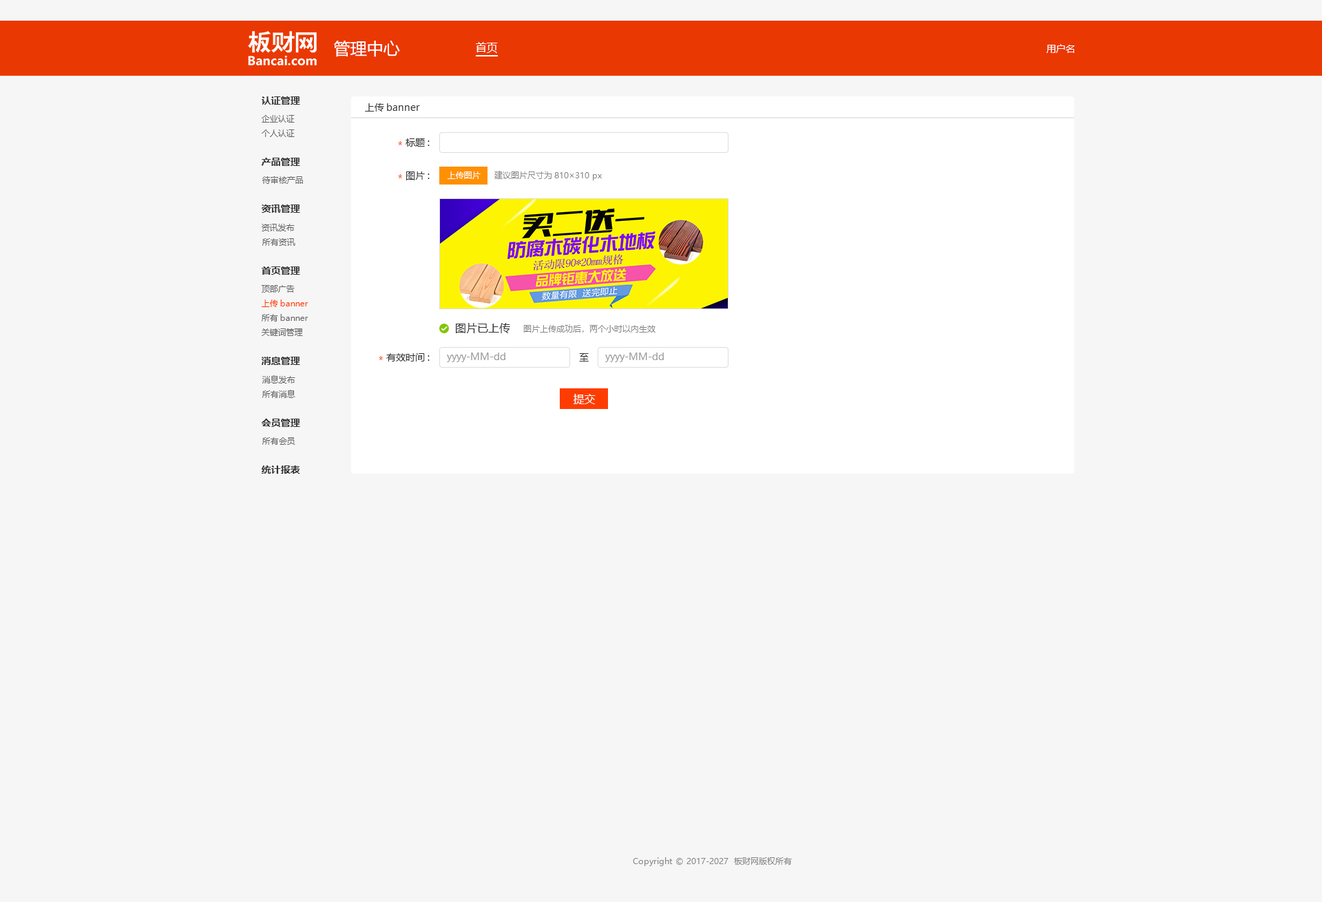
<style>
.page{position:relative;width:1322px;height:902px;background:#f6f6f6}
.page>*{position:absolute;margin:0}
.t1{font:16.5px "MicrosoftYaHei";color:#ffffff}
.t2{font:11px "MicrosoftYaHei";color:#ffffff}
.t3{font:9.6px "MicrosoftYaHei";color:#ffffff}
.t4{font:9.6px "MicrosoftYaHei-Bold";color:#333333}
.t5{font:9.6px "MicrosoftYaHei";color:#333333}
.t6{font:8.3px "MicrosoftYaHei";color:#666666}
.t7{font:9.6px "MicrosoftYaHei";color:#ff3c00}
.t8{font:8.3px "MicrosoftYaHei";color:#fffefe}
.t9{font:8.3px "MicrosoftYaHei";color:#888888}
.t10{font:8.3px "MicrosoftYaHei";color:#ff3c00}
.t11{font:11px "MicrosoftYaHei";color:#333333}
.t12{font:9.6px "MicrosoftYaHei";color:#999999}
.t13{font:11px "MicrosoftYaHei";color:#fffefe}
</style>
<div class="page">
<p class="t1" style="left:334px;top:41px;width:66px;height:16px">管理中心</p>
<p class="t2" style="left:476px;top:42px;width:22px;height:11px">首页</p>
<p class="t3" style="left:1047px;top:44px;width:28px;height:9px">用户名</p>
<p class="t4" style="left:262px;top:96px;width:38px;height:9px">认证管理</p>
<p class="t5" style="left:365px;top:103px;width:55px;height:9px">上传banner</p>
<p class="t6" style="left:262px;top:115px;width:33px;height:8px">企业认证</p>
<p class="t6" style="left:262px;top:129px;width:33px;height:8px">个人认证</p>
<p class="t7" style="left:398px;top:141px;width:4px;height:4px">*</p>
<p class="t5" style="left:406px;top:138px;width:24px;height:9px">标题:</p>
<p class="t4" style="left:261px;top:158px;width:39px;height:8px">产品管理</p>
<p class="t5" style="left:406px;top:171px;width:24px;height:9px">图片:</p>
<p class="t8" style="left:448px;top:171px;width:33px;height:8px">上传图片</p>
<p class="t9" style="left:494px;top:171px;width:108px;height:9px">建议图片尺寸为810×310 px</p>
<p class="t6" style="left:262px;top:176px;width:41px;height:8px">待审核产品</p>
<p class="t7" style="left:398px;top:174px;width:4px;height:4px">*</p>
<p class="t4" style="left:262px;top:204px;width:38px;height:9px">资讯管理</p>
<p class="t6" style="left:262px;top:224px;width:33px;height:7px">资讯发布</p>
<p class="t6" style="left:262px;top:238px;width:33px;height:8px">所有资讯</p>
<p class="t4" style="left:262px;top:266px;width:38px;height:9px">首页管理</p>
<p class="t6" style="left:261px;top:285px;width:34px;height:8px">顶部广告</p>
<p class="t10" style="left:262px;top:300px;width:46px;height:7px">上传banner</p>
<p class="t6" style="left:262px;top:314px;width:46px;height:8px">所有banner</p>
<p class="t6" style="left:262px;top:328px;width:41px;height:8px">关键词管理</p>
<p class="t11" style="left:456px;top:323px;width:54px;height:10px">图片已上传</p>
<p class="t9" style="left:523px;top:324px;width:132px;height:9px">图片上传成功后，两个小时以内生效</p>
<p class="t5" style="left:386px;top:353px;width:44px;height:8px">有效时间:</p>
<p class="t12" style="left:447px;top:353px;width:58px;height:9px">yyyy-MM-dd</p>
<p class="t5" style="left:579px;top:353px;width:10px;height:8px">至</p>
<p class="t12" style="left:605px;top:353px;width:59px;height:9px">yyyy-MM-dd</p>
<p class="t4" style="left:262px;top:357px;width:38px;height:8px">消息管理</p>
<p class="t7" style="left:379px;top:356px;width:4px;height:4px">*</p>
<p class="t6" style="left:262px;top:375px;width:33px;height:9px">消息发布</p>
<p class="t6" style="left:262px;top:390px;width:33px;height:8px">所有消息</p>
<p class="t13" style="left:574px;top:394px;width:22px;height:10px">提交</p>
<p class="t4" style="left:262px;top:419px;width:38px;height:8px">会员管理</p>
<p class="t6" style="left:262px;top:437px;width:33px;height:8px">所有会员</p>
<p class="t4" style="left:262px;top:465px;width:38px;height:9px">统计报表</p>
<p class="t9" style="left:633px;top:857px;width:159px;height:9px">Copyright © 2017-2027  板财网版权所有</p>
</div>
